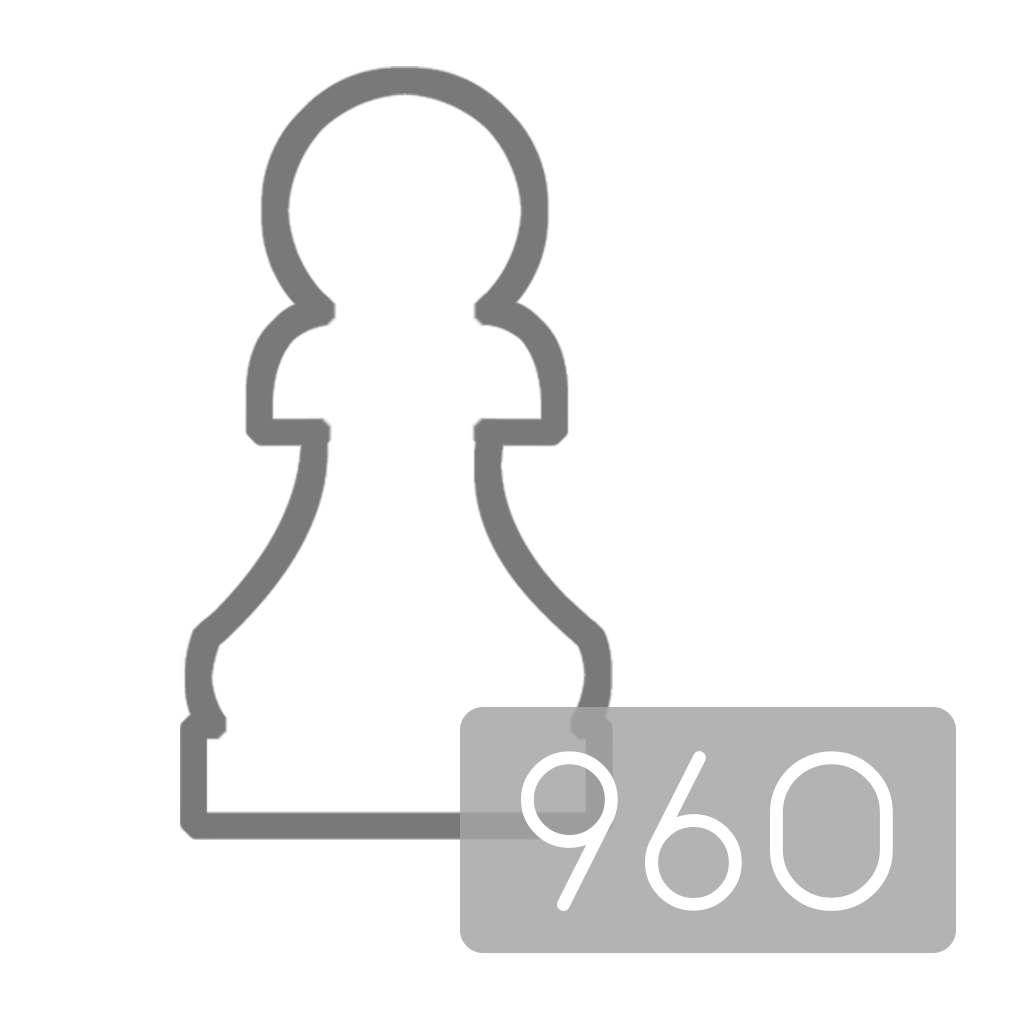
<style>
.page{position:relative;width:1024px;height:1024px;background:#ffffff}
.page>*{position:absolute;margin:0}
.t1{font:255.1px "VoidRegular";color:#ffffff}
</style>
<div class="page">
<p class="t1" style="left:521px;top:751px;width:372px;height:160px">960</p>
</div>
